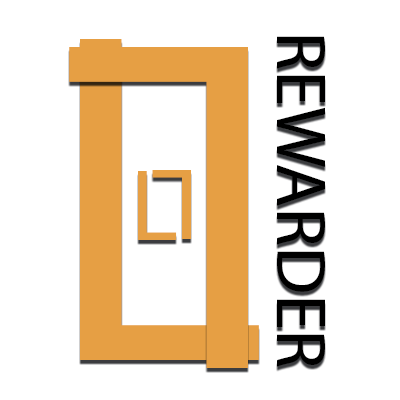
<style>
.page{position:relative;width:400px;height:400px;background:#ffffff}
.page>*{position:absolute;margin:0}
.t1{font:476.9px "MyriadPro-Regular";color:#e69f44}
.t2{font:71.8px "MyriadPro-Regular";color:#000000}
.t3{font:476.5px "MyriadPro-Regular";color:#e69f44}
.t4{font:102.1px "MyriadPro-Regular";color:#e69f44}
.t5{font:102.4px "MyriadPro-Regular";color:#e69f44}
</style>
<div class="page">
<p class="t1" style="left:80px;top:39px;width:179px;height:321px">L</p>
<p class="t2" style="left:277px;top:36px;width:48px;height:331px;rotate:90deg">REWARDER</p>
<p class="t3" style="left:69px;top:47px;width:179px;height:321px;rotate:180deg">L</p>
<p class="t4" style="left:138px;top:171px;width:39px;height:69px">L</p>
<p class="t5" style="left:152px;top:170px;width:39px;height:69px;rotate:180deg">L</p>
</div>
